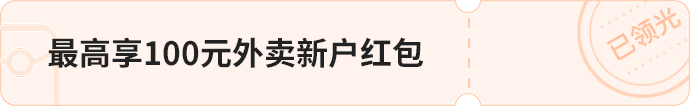
<style>
.page{position:relative;width:690px;height:106px;background:#fff4ed}
.page>*{position:absolute;margin:0}
.t1{font:32px "SourceHanSansCN-Bold";color:#222222}
</style>
<div class="page">
<p class="t1" style="left:48px;top:37px;width:375px;height:31px">最高享100元外卖新户红包</p>
</div>
